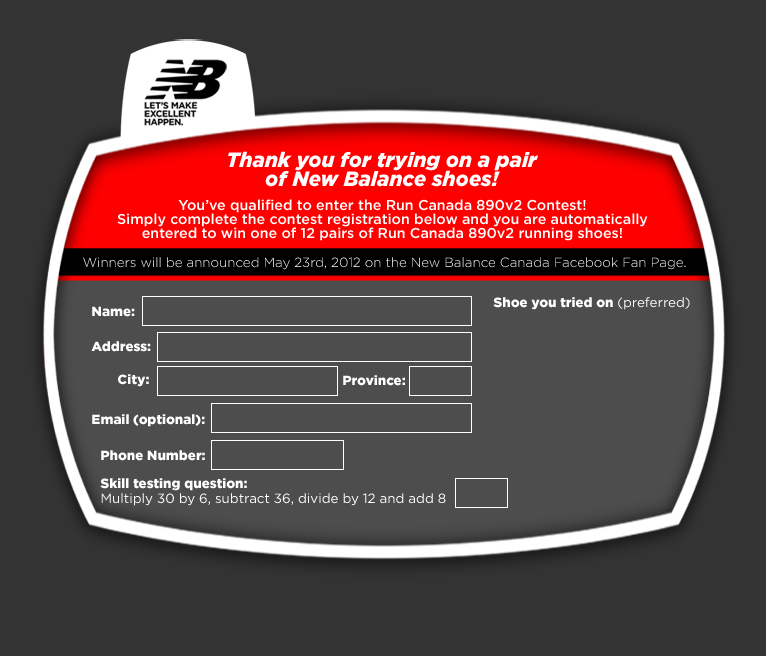
<style>
.page{position:relative;width:766px;height:656px;background:#333333}
.page>*{position:absolute;margin:0}
.t1{font:20.6px/19px "Gotham-BlackItalic";color:#ffffff}
.t2{font:14.3px/14px "Gotham-Medium";color:#ffffff}
.t3{font:13.3px "Gotham-Light";color:#ffffff}
.t4{font:13.3px "Gotham-Black";color:#ffffff}
.t5{font:13.3px "Gotham-Book";color:#ffffff}
.t6{font:13.3px/15px "Gotham-Book";color:#ffffff}
.t7{font:13.3px/20px "Gotham-Black";color:#ffffff}
</style>
<div class="page">
<p class="t1" style="left:228px;top:151px;width:310px;height:36px;text-align:center">Thank you for trying on a pair <br>of New Balance shoes!</p>
<p class="t2" style="left:117px;top:199px;width:531px;height:42px;text-align:center">You’ve qualified to enter the Run Canada 890v2 Contest! <br>Simply complete the contest registration below and you are automatically <br>entered to win one of 12 pairs of Run Canada 890v2 running shoes!</p>
<p class="t3" style="left:83px;top:257px;width:603px;height:13px">Winners will be announced May 23rd, 2012 on the New Balance Canada Facebook Fan Page.</p>
<p class="t4" style="left:493px;top:297px;width:197px;height:13px">Shoe you tried on <span class="t5">(preferred)</span></p>
<p class="t4" style="left:92px;top:306px;width:43px;height:11px">Name:</p>
<p class="t4" style="left:91px;top:341px;width:60px;height:11px">Address:</p>
<p class="t4" style="left:118px;top:374px;width:31px;height:13px">City:</p>
<p class="t4" style="left:343px;top:375px;width:62px;height:11px">Province:</p>
<p class="t4" style="left:92px;top:414px;width:113px;height:13px">Email (optional):</p>
<p class="t4" style="left:101px;top:450px;width:104px;height:11px">Phone Number:</p>
<p class="t6" style="left:100px;top:478px;width:346px;height:28px"><span class="t7">Skill testing question: <br></span>Multiply 30 by 6, subtract 36, divide by 12 and add 8</p>
</div>
